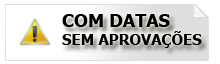
<style>
.page{position:relative;width:220px;height:64px;background:#ffffff}
.page>*{position:absolute;margin:0}
.t1{font:15px "Tahoma-Bold";color:#000000}
.t2{font:18px "Tahoma-Bold";color:#000000}
</style>
<div class="page">
<p class="t1" style="left:62px;top:14px;width:140px;height:34px"><span class="t2">COM DATAS<br></span>SEM APROVAÇÕES</p>
</div>
